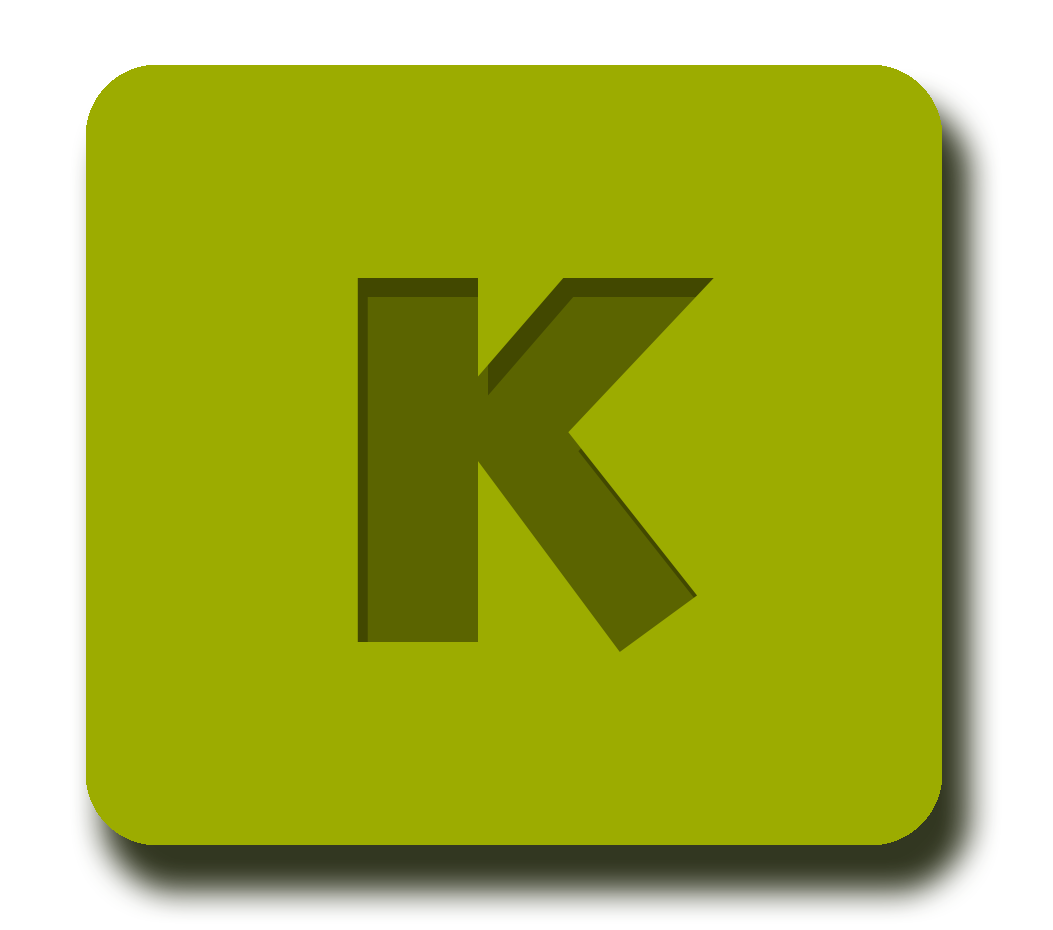
<style>
.page{position:relative;width:1053px;height:930px;background:#9cac00}
.page>*{position:absolute;margin:0}
.t1{font:504.7px "BadTyp-Regular";color:#5b6400}
</style>
<div class="page">
<p class="t1" style="left:357px;top:278px;width:357px;height:374px">k</p>
</div>
